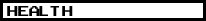
<style>
.page{position:relative;width:206px;height:21px;background:#ffffff}
.page>*{position:absolute;margin:0}
.t1{font:20px "ArcadeClassic";color:#000000}
</style>
<div class="page">
<p class="t1" style="left:7px;top:6px;width:66px;height:10px">health</p>
</div>
